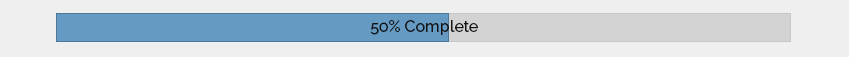
<style>
.page{position:relative;width:849px;height:57px;background:#efefef}
.page>*{position:absolute;margin:0}
.t1{font:16px "Raleway-Medium";color:#131313}
</style>
<div class="page">
<p class="t1" style="left:370px;top:20px;width:108px;height:15px">50% Complete</p>
</div>
